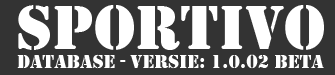
<style>
.page{position:relative;width:335px;height:75px;background:#333333}
.page>*{position:absolute;margin:0}
.t1{font:65px "Stencil";color:#ffffff}
.t2{font:20px "Stencil";color:#ffffff}
</style>
<div class="page">
<p class="t1" style="left:18px;top:5px;width:306px;height:45px">Sportivo</p>
<p class="t2" style="left:17px;top:54px;width:307px;height:15px">Database - Versie: 1.0.02 BETA</p>
</div>
